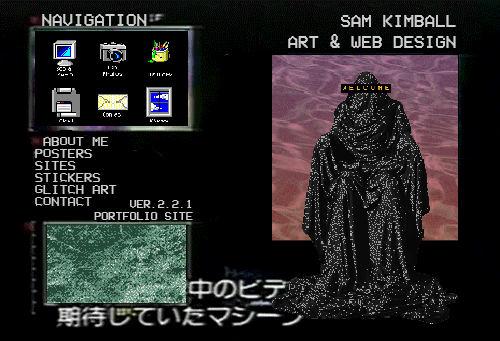
<style>
.page{position:relative;width:500px;height:341px;background:#000000}
.page>*{position:absolute;margin:0}
.t1{font:18px "VCROSDMono";color:#cfcdcd}
.t2{font:18px/20.6px "VCROSDMono";color:#cfcdcd}
.t3{font:14px/12px "VCROSDMono";color:#cfcdcd}
.t4{font:12px/12px "VCROSDMono";color:#cfcdcd}
</style>
<div class="page">
<p class="t1" style="left:42px;top:14px;width:105px;height:12px">NAVIGATION</p>
<p class="t2" style="left:288px;top:15px;width:168px;height:33px;text-align:right">SAM KIMBALL<br>ART &amp; WEB DESIGN</p>
<p class="t3" style="left:35px;top:137px;width:82px;height:69px">ABOUT ME<br>POSTERS<br>SITES<br>STICKERS<br>GLITCH ART<br>CONTACT</p>
<p class="t4" style="left:94px;top:200px;width:99px;height:20px;text-align:right">VER.2.2.1<br>PORTFOLIO SITE</p>
</div>
